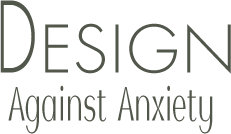
<style>
.page{position:relative;width:231px;height:134px;background:#ffffff}
.page>*{position:absolute;margin:0}
.t1{font:48px/48px "TAModernTimes-UltCnSemiLight";color:#51574b}
.t2{font:54px/36px "FuturaPT-Light";color:#51574b;scale:0.67 1}
.t3{font:108px/36px "FuturaPT-Light";color:#51574b;scale:0.67 1}
.t4{font:72px/36px "FuturaPT-Light";color:#51574b}
</style>
<div class="page">
<p class="t1" style="left:0px;top:0px;width:231px;height:134px;text-align:center"><span class="t2"> </span><span class="t3">D</span><span class="t4">ESIGN<br></span>Against  Anxiety</p>
</div>
